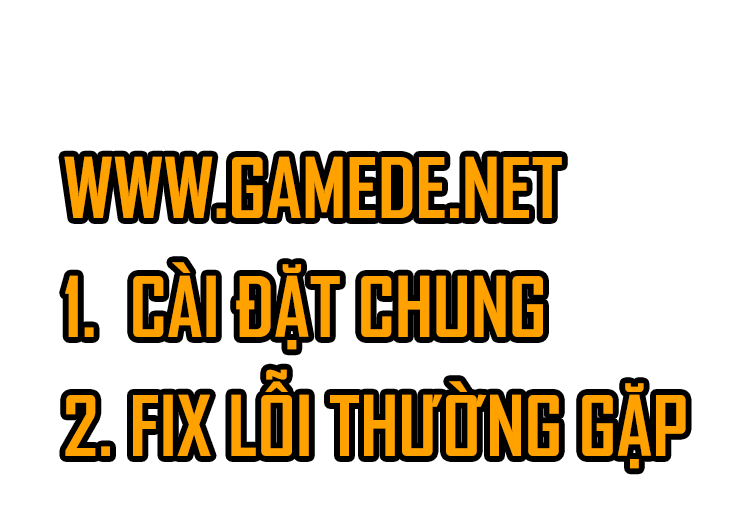
<style>
.page{position:relative;width:746px;height:532px;background:#ffffff}
.page>*{position:absolute;margin:0}
.t1{font:80px/119px "SVN-AgencyFBbold";color:#ffa200}
</style>
<div class="page">
<p class="t1" style="left:64px;top:156px;width:622px;height:313px">WWW.GAMEDE.NET<br>1.  CÀI ĐẶT CHUNG<br>2. FIX LỖI THƯỜNG GẶP</p>
</div>
